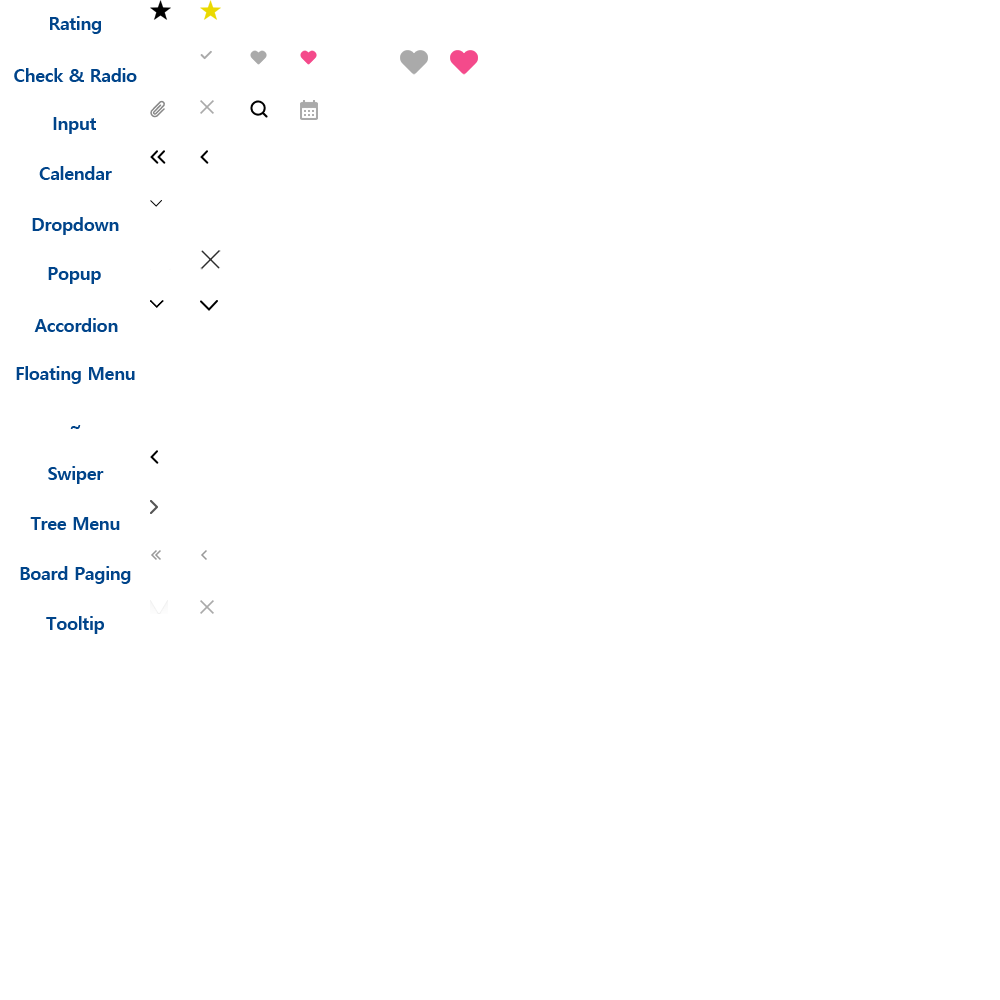
<style>
.page{position:relative;width:1000px;height:1000px;background:#ffffff}
.page>*{position:absolute;margin:0}
.t1{font:18px "MalgunGothicBold";letter-spacing:-0.02em;color:#00448a}
</style>
<div class="page">
<p class="t1" style="left:50px;top:16px;width:51px;height:18px">Rating</p>
<p class="t1" style="left:14px;top:68px;width:123px;height:14px">Check &amp; Radio</p>
<p class="t1" style="left:53px;top:117px;width:43px;height:17px">Input</p>
<p class="t1" style="left:39px;top:166px;width:73px;height:14px">Calendar</p>
<p class="t1" style="left:32px;top:217px;width:87px;height:18px">Dropdown</p>
<p class="t1" style="left:48px;top:267px;width:53px;height:17px">Popup</p>
<p class="t1" style="left:34px;top:318px;width:84px;height:14px">Accordion</p>
<p class="t1" style="left:16px;top:366px;width:119px;height:18px">Floating Menu</p>
<p class="t1" style="left:70px;top:425px;width:11px;height:4px">~</p>
<p class="t1" style="left:48px;top:466px;width:56px;height:18px">Swiper</p>
<p class="t1" style="left:30px;top:517px;width:90px;height:13px">Tree Menu</p>
<p class="t1" style="left:20px;top:566px;width:111px;height:18px">Board Paging</p>
<p class="t1" style="left:46px;top:616px;width:58px;height:18px">Tooltip</p>
</div>
